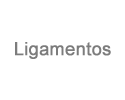
<style>
.page{position:relative;width:125px;height:100px;background:#ffffff}
.page>*{position:absolute;margin:0}
.t1{font:18px "ArialMT";color:#7c7c7c;font-weight:bold}
</style>
<div class="page">
<p class="t1" style="left:15px;top:42px;width:96px;height:17px">Ligamentos</p>
</div>
